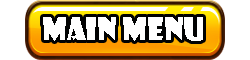
<style>
.page{position:relative;width:250px;height:60px;background:#ffffff}
.page>*{position:absolute;margin:0}
.t1{font:30px "ShowcardGothic-Reg";color:#ffffff}
</style>
<div class="page">
<p class="t1" style="left:43px;top:17px;width:160px;height:24px">Main Menu</p>
</div>
